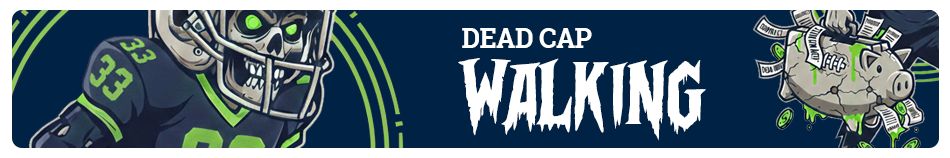
<style>
.page{position:relative;width:950px;height:158px;background:#002244}
.page>*{position:absolute;margin:0}
.t1{font:27.1px "RobotoSlab-Bold";letter-spacing:-0.025em;color:#ffffff;text-transform:uppercase}
.t2{font:91.3px "FrightmareDemo";letter-spacing:0.005em;color:#ffffff;text-transform:uppercase}
</style>
<div class="page">
<p class="t1" style="left:462px;top:28px;width:130px;height:20px">Dead Cap</p>
<p class="t2" style="left:458px;top:58px;width:248px;height:83px">Walking</p>
</div>
